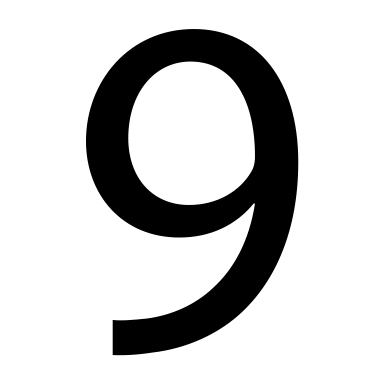
<style>
.page{position:relative;width:384px;height:384px;background:#ffffff}
.page>*{position:absolute;margin:0}
.t1{font:486.1px "MyriadPro-Regular";color:#000000}
</style>
<div class="page">
<p class="t1" style="left:86px;top:29px;width:213px;height:327px">9</p>
</div>
